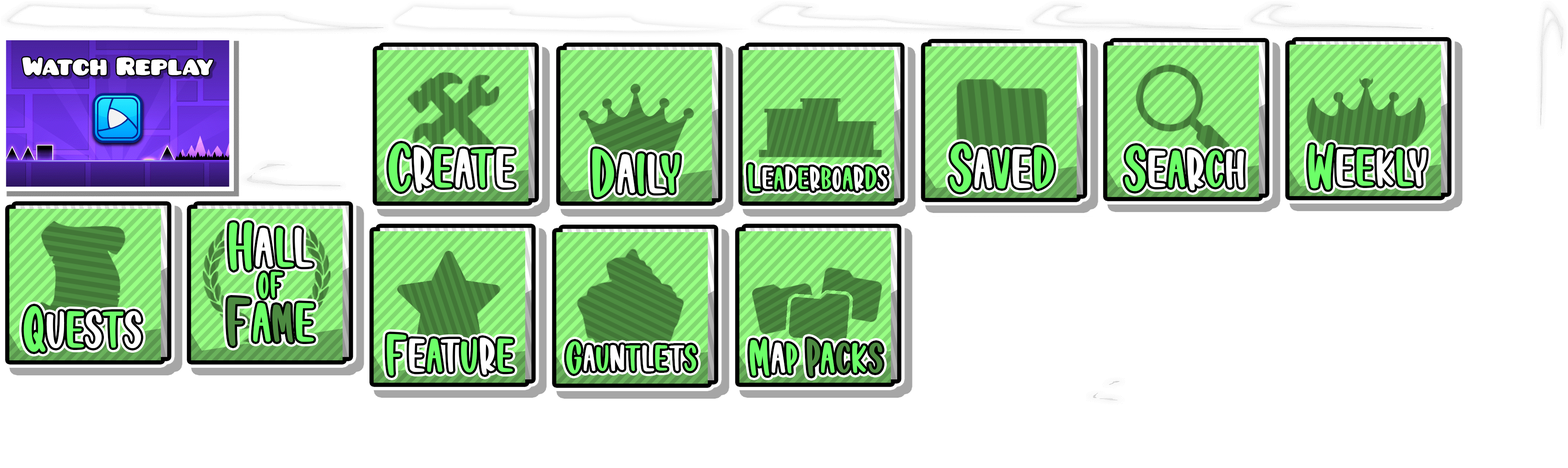
<style>
.page{position:relative;width:1568px;height:468px;background:#ffffff}
.page>*{position:absolute;margin:0}
.t1{font:68.7px "OrangeJuiceRegular";color:#6cff68}
.t2{font:68.7px "OrangeJuiceRegular";color:#ffffff}
.t3{font:64.8px "OrangeJuiceRegular";color:#6cff68}
.t4{font:64.8px "OrangeJuiceRegular";color:#ffffff}
.t5{font:38.7px "OrangeJuiceRegular";color:#6cff68}
.t6{font:38.7px "OrangeJuiceRegular";color:#ffffff}
.t7{font:59.2px "OrangeJuiceRegular";color:#6cff68}
.t8{font:59.2px "OrangeJuiceRegular";color:#ffffff}
.t9{font:45.6px "OrangeJuiceRegular";color:#6cff68}
.t10{font:45.6px "OrangeJuiceRegular";color:#ffffff}
.t11{font:52.9px "OrangeJuiceRegular";color:#6cff68}
.t12{font:52.9px "OrangeJuiceRegular";color:#ffffff}
.t13{font:52.9px "OrangeJuiceRegular";color:#4d8a41}
</style>
<div class="page">
<p class="t1" style="left:389px;top:143px;width:125px;height:49px">C<span class="t2">r</span>e<span class="t2">a</span>t<span class="t2">e</span></p>
<p class="t1" style="left:592px;top:149px;width:88px;height:48px">D<span class="t2">a</span>i<span class="t2">l</span>y</p>
<p class="t1" style="left:950px;top:144px;width:104px;height:48px">S<span class="t2">a</span>v<span class="t2">e</span>d</p>
<p class="t3" style="left:1125px;top:146px;width:119px;height:45px">S<span class="t4">e</span>a<span class="t4">r</span>c<span class="t4">h</span></p>
<p class="t3" style="left:1308px;top:144px;width:119px;height:46px">W<span class="t4">e</span>e<span class="t4">k</span>l<span class="t4">y</span></p>
<p class="t5" style="left:748px;top:164px;width:139px;height:27px">L<span class="t6">e</span>a<span class="t6">d</span>e<span class="t6">r</span>b<span class="t6">o</span>a<span class="t6">r</span>d<span class="t6">s</span></p>
<p class="t3" style="left:23px;top:306px;width:118px;height:46px">Q<span class="t4">u</span>e<span class="t4">s</span>t<span class="t4">s</span></p>
<p class="t7" style="left:387px;top:334px;width:126px;height:42px">F<span class="t8">e</span>a<span class="t8">t</span>u<span class="t8">r</span>e</p>
<p class="t9" style="left:566px;top:341px;width:130px;height:33px">G<span class="t10">a</span>u<span class="t10">n</span>t<span class="t10">l</span>e<span class="t10">t</span>s</p>
<p class="t11" style="left:750px;top:339px;width:132px;height:37px">M<span class="t12">a</span>p <span class="t13">P</span>a<span class="t13">c</span>k<span class="t13">s</span></p>
</div>
